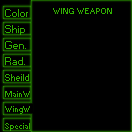
<style>
.page{position:relative;width:132px;height:132px;background:#000000}
.page>*{position:absolute;margin:0}
.t1{font:10px "Small Fonts";color:#31af00}
.t2{font:8px "Small Fonts";color:#31af00}
.t3{font:9px "Small Fonts";color:#31af00}
</style>
<div class="page">
<p class="t1" style="left:5px;top:9px;width:23px;height:8px">Color</p>
<p class="t2" style="left:53px;top:8px;width:59px;height:6px">WING WEAPON</p>
<p class="t1" style="left:5px;top:25px;width:20px;height:10px">Ship</p>
<p class="t1" style="left:5px;top:41px;width:21px;height:8px">Gen.</p>
<p class="t1" style="left:5px;top:57px;width:20px;height:8px">Rad.</p>
<p class="t3" style="left:5px;top:74px;width:24px;height:7px">Sheild</p>
<p class="t2" style="left:5px;top:91px;width:25px;height:6px">MainW</p>
<p class="t2" style="left:5px;top:123px;width:25px;height:8px">Special</p>
</div>
